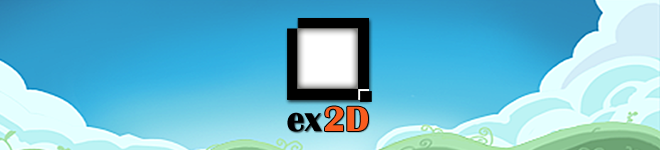
<style>
.page{position:relative;width:660px;height:150px}
.page>*{position:absolute;margin:0}
.t1{font:36.3px "BritannicBold";color:#000000}
.t2{font:36.3px "BritannicBold";color:#f85c1e}
</style>
<div class="page">
<p class="t1" style="left:287px;top:112px;width:35px;height:20px">ex</p>
<p class="t2" style="left:325px;top:106px;width:43px;height:25px">2D</p>
</div>
